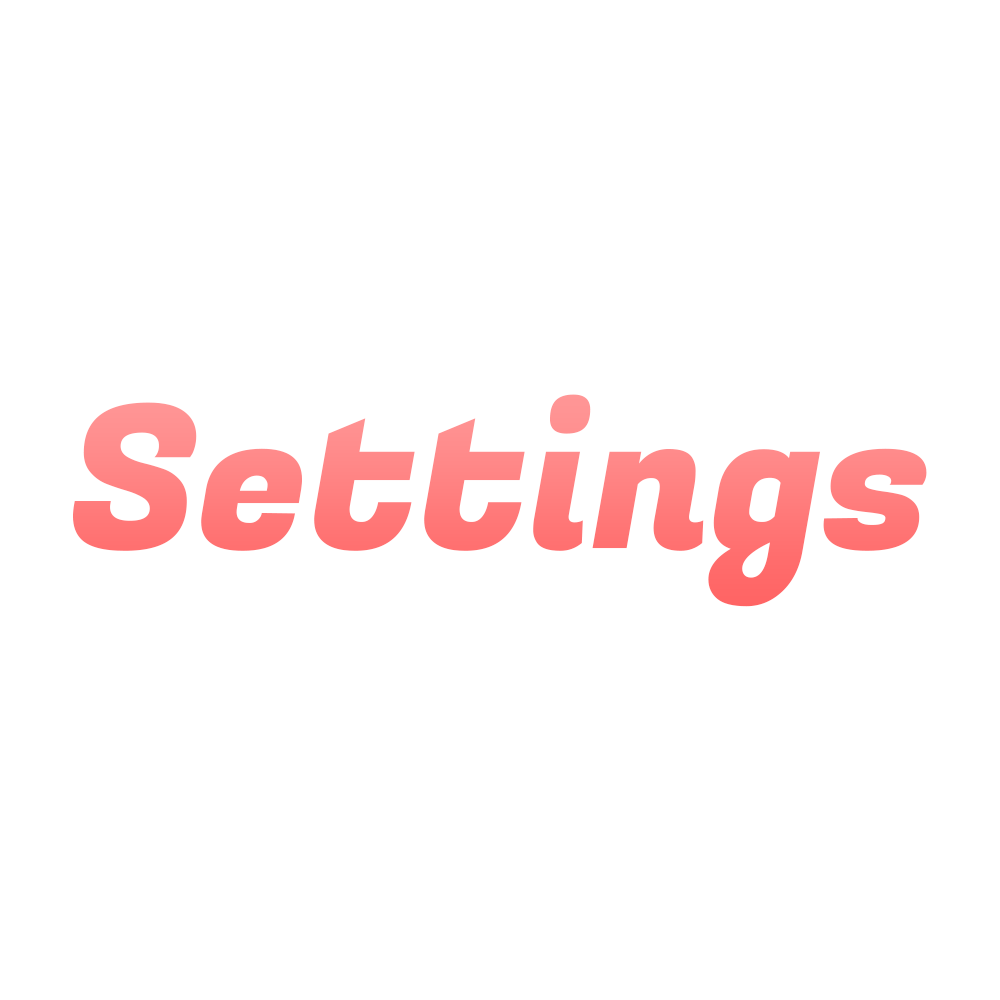
<style>
.page{position:relative;width:1000px;height:1000px;background:#ffffff}
.page>*{position:absolute;margin:0}
.t1{font:200px "FugazOne-Regular";color:#ff7e7e}
</style>
<div class="page">
<p class="t1" style="left:73px;top:394px;width:854px;height:213px">Settings</p>
</div>
